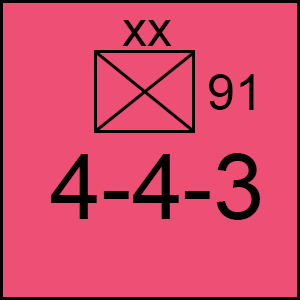
<style>
.page{position:relative;width:300px;height:300px;background:#ee4f74}
.page>*{position:absolute;margin:0}
.t1{font:50px "ArialMT";color:#000000}
.t2{font:91.7px "ArialMT";color:#000000}
</style>
<div class="page">
<p class="t1" style="left:122px;top:20px;width:50px;height:26px">xx</p>
<p class="t1" style="left:209px;top:74px;width:45px;height:36px">91</p>
<p class="t2" style="left:51px;top:153px;width:209px;height:67px">4-4-3</p>
</div>
